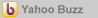
<style>
.page{position:relative;width:98px;height:18px;background:#cccccc}
.page>*{position:absolute;margin:0}
.t1{font:11px "Arial-BoldMT";color:#777777}
</style>
<div class="page">
<p class="t1" style="left:21px;top:5px;width:62px;height:9px">Yahoo Buzz</p>
</div>
